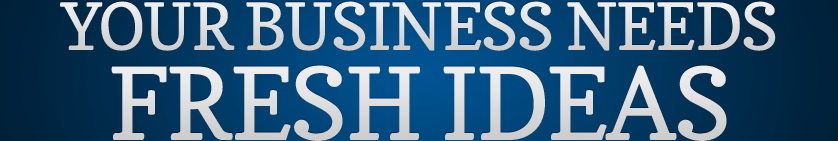
<style>
.page{position:relative;width:838px;height:141px}
.page>*{position:absolute;margin:0}
.t1{font:65px/90px "Copse";letter-spacing:-0.025em;color:#eeeeee;text-transform:uppercase}
.t2{font:100px/90px "Copse";letter-spacing:-0.025em;color:#eeeeee;text-transform:uppercase}
</style>
<div class="page">
<p class="t1" style="left:60px;top:1px;width:716px;height:140px;text-align:center">Your Business Needs<br><span class="t2">Fresh Ideas</span></p>
</div>
